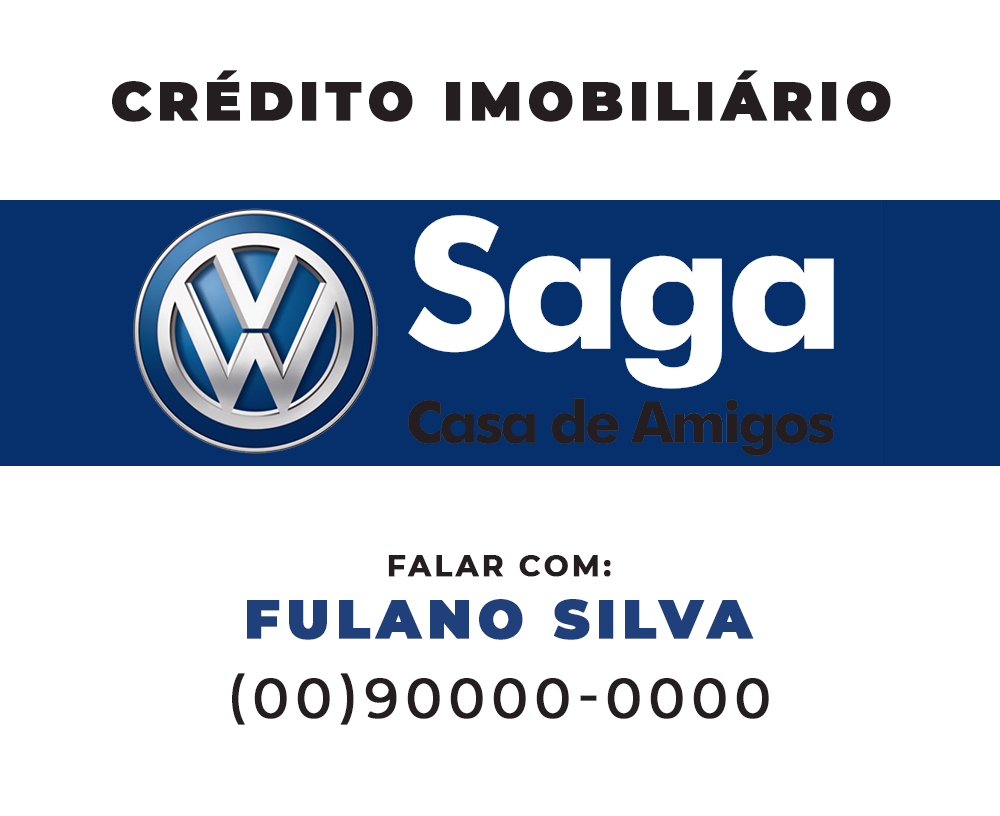
<style>
.page{position:relative;width:1000px;height:816px;background:#ffffff}
.page>*{position:absolute;margin:0}
.t1{font:54.2px "Montserrat-Black";letter-spacing:0.1em;color:#241e20;text-transform:uppercase;font-weight:bold}
.t2{font:29.2px "Montserrat-Bold";letter-spacing:0.1em;color:#241e20;text-transform:uppercase;font-weight:bold}
.t3{font:54.2px "Montserrat-Black";letter-spacing:0.1em;color:#1f407a;text-transform:uppercase;font-weight:bold}
.t4{font:54.2px "Montserrat-Medium";letter-spacing:0.1em;color:#241e20;text-transform:uppercase;font-weight:bold}
</style>
<div class="page">
<p class="t1" style="left:112px;top:70px;width:779px;height:52px">crédito imobiliário</p>
<p class="t2" style="left:388px;top:555px;width:223px;height:22px">falar com:</p>
<p class="t3" style="left:247px;top:599px;width:507px;height:41px">Fulano Silva</p>
<p class="t4" style="left:232px;top:673px;width:537px;height:52px">(00)90000-0000</p>
</div>
